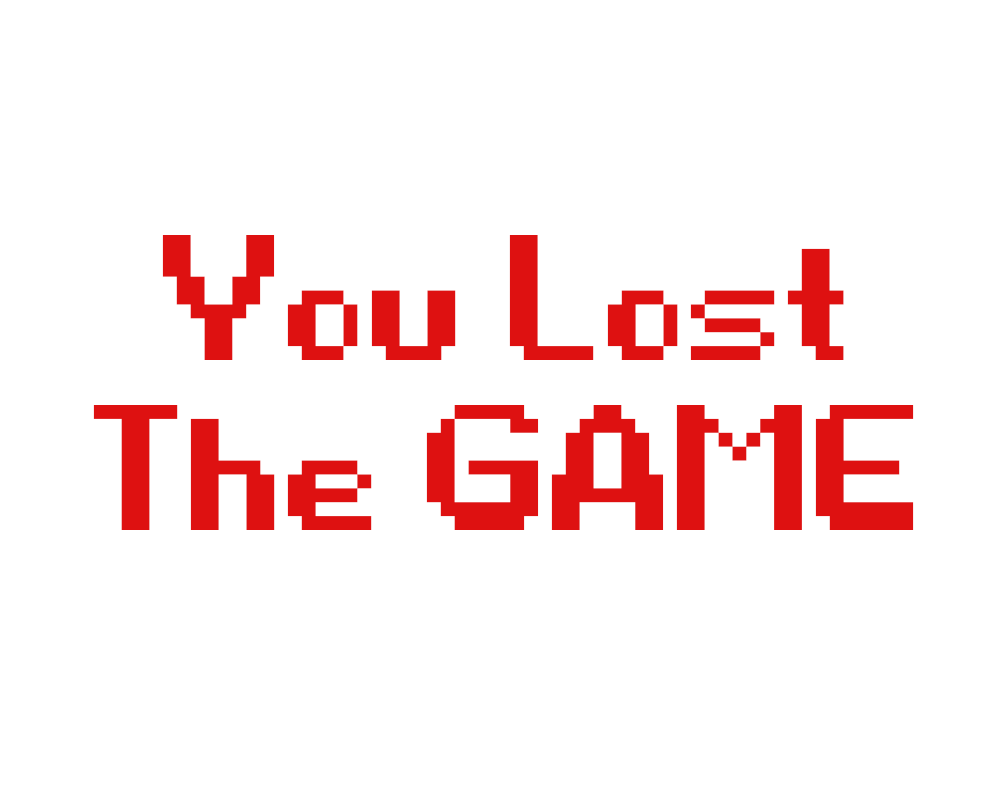
<style>
.page{position:relative;width:1000px;height:800px;background:#ffffff}
.page>*{position:absolute;margin:0}
.t1{font:444.5px/170px "Game-Over";color:#de1111}
</style>
<div class="page">
<p class="t1" style="left:93px;top:235px;width:821px;height:295px;text-align:center">You Lost<br>The GAME</p>
</div>
